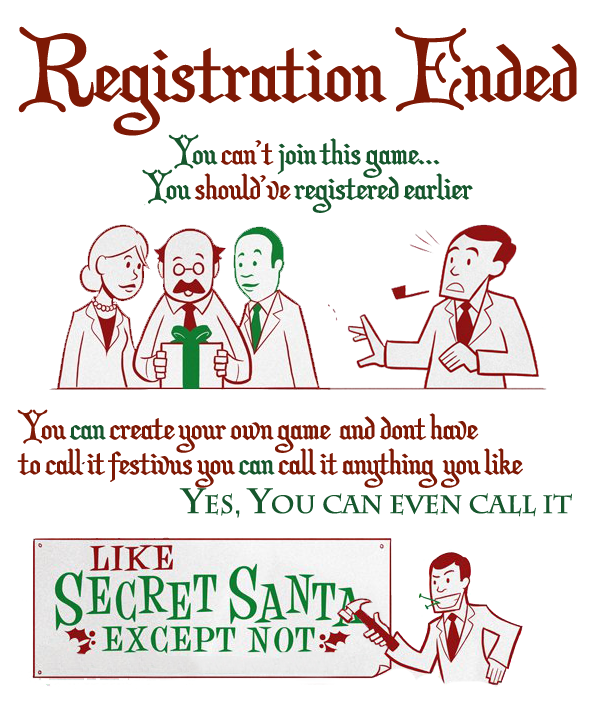
<style>
.page{position:relative;width:600px;height:708px;background:#ffffff}
.page>*{position:absolute;margin:0}
.t1{font:88.3px "ChristmasCardII";color:#7e1905}
.t2{font:35px/35px "ChristmasCardII";color:#16572d}
.t3{font:35px/35px "ChristmasCardII";color:#7e1905}
.t4{font:25px "CharlemagneStd-Bold";color:#16572d}
.t5{font:35px "CharlemagneStd-Bold";color:#16572d}
</style>
<div class="page">
<p class="t1" style="left:18px;top:26px;width:559px;height:110px">Registration Ended</p>
<p class="t2" style="left:142px;top:134px;width:331px;height:79px;text-align:center">You <span class="t3">can’t</span> join this game... <br>You <span class="t3">should’ve</span> registered earlier</p>
<p class="t3" style="left:17px;top:409px;width:506px;height:79px">You <span class="t2">can </span>create your own game  and dont have <br>to call it festivus you <span class="t2">can</span> call it anything  you like</p>
<p class="t4" style="left:179px;top:488px;width:393px;height:30px"><span class="t5">y</span>es, <span class="t5">y</span>ou can even call it</p>
</div>
